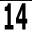
<style>
.page{position:relative;width:32px;height:32px;background:#ffffff}
.page>*{position:absolute;margin:0}
.t1{font:36px "Verdana-Bold";color:#000000;scale:0.5 1}
</style>
<div class="page">
<p class="t1" style="left:4px;top:2px;width:24px;height:27px">14</p>
</div>
